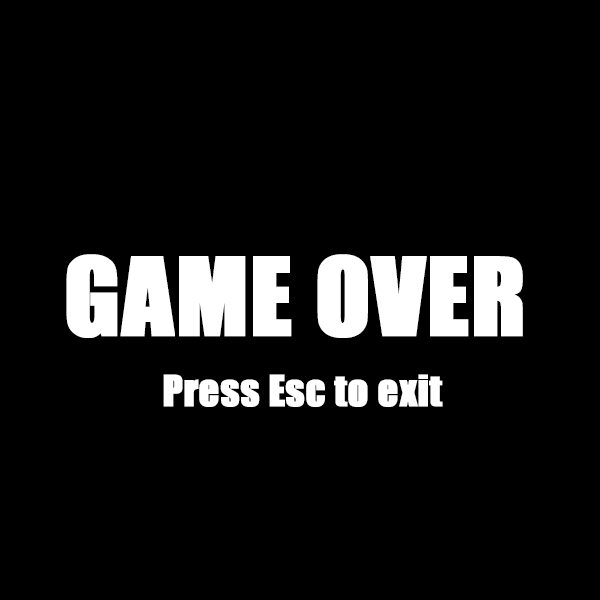
<style>
.page{position:relative;width:600px;height:600px;background:#000000}
.page>*{position:absolute;margin:0}
.t1{font:40px "Impact";color:#ffffff;font-weight:bold}
</style>
<div class="page">
<p class="t1" style="left:163px;top:374px;width:280px;height:33px">Press Esc to exit</p>
</div>
